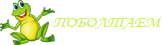
<style>
.page{position:relative;width:163px;height:45px;background:#ffffff}
.page>*{position:absolute;margin:0}
.t1{font:14.6px "MonotypeCorsiva";color:#d1f16a;scale:1.2 1}
</style>
<div class="page">
<p class="t1" style="left:53px;top:17px;width:108px;height:12px">ПОБОЛТАЕМ</p>
</div>
